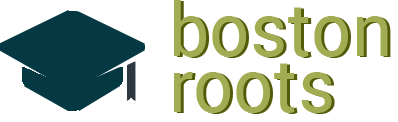
<style>
.page{position:relative;width:398px;height:122px;background:#ffffff}
.page>*{position:absolute;margin:0}
.t1{font:74px/56px "Roboto-Regular";color:#a2ad53;scale:0.96 1}
.t2{font:74px/56px "Roboto-Regular";scale:0.96 1}
</style>
<div class="page">
<p class="t1" style="left:174px;top:0px;width:214px;height:113px">boston<br>roots</p>
<p class="t2" style="left:177px;top:1px;width:214px;height:113px">boston<br>roots</p>
</div>
